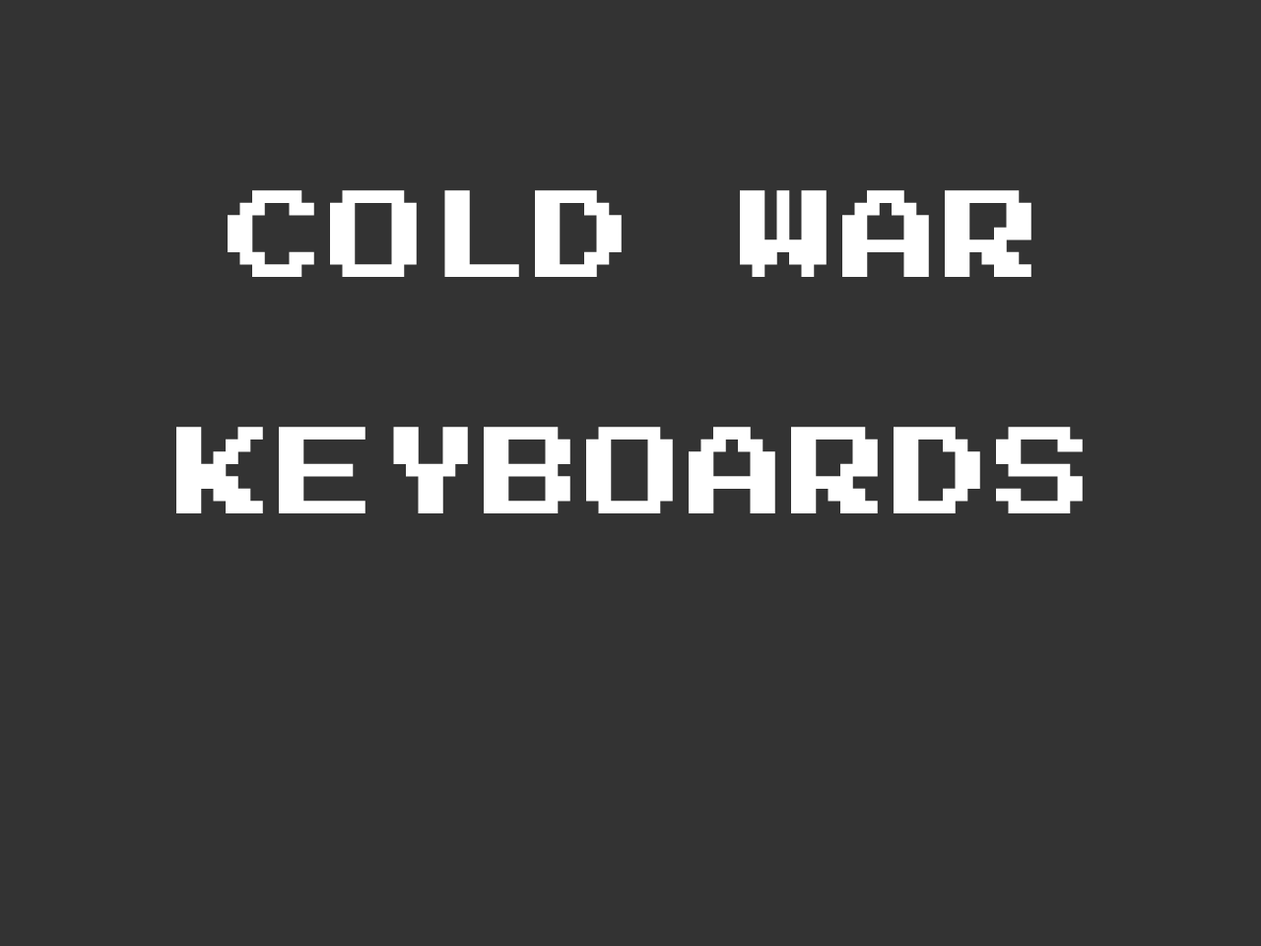
<style>
.page{position:relative;width:1261px;height:946px;background:#333333}
.page>*{position:absolute;margin:0}
.t1{font:98.5px "PressStart2P-Regular";letter-spacing:0.04em;color:#ffffff}
</style>
<div class="page">
<p class="t1" style="left:176px;top:190px;width:907px;height:323px;text-align:center">COLD WAR<br><br>KEYBOARDS</p>
</div>
